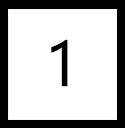
<style>
.page{position:relative;width:125px;height:128px;background:#ffffff}
.page>*{position:absolute;margin:0}
.t1{font:60px "MicrosoftYaHei";color:#000000}
</style>
<div class="page">
<p class="t1" style="left:51px;top:39px;width:17px;height:48px">1</p>
</div>
